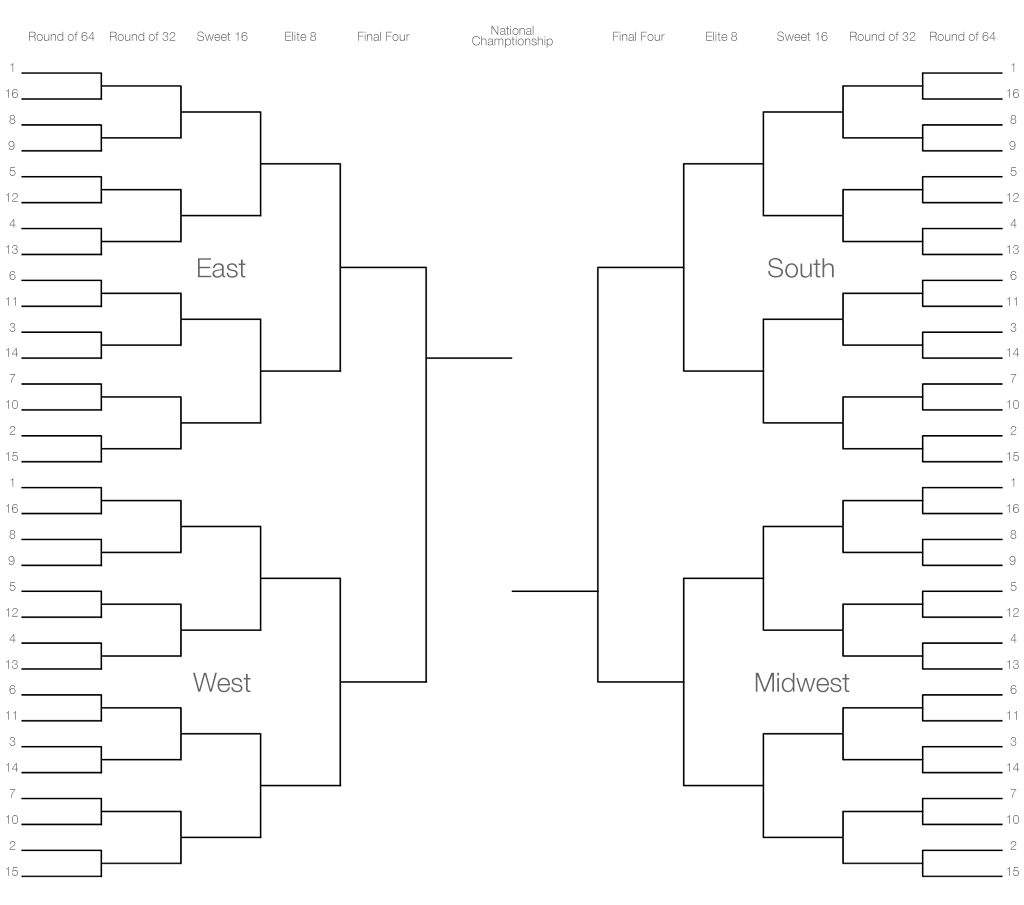
<style>
.page{position:relative;width:1024px;height:905px;background:#ffffff}
.page>*{position:absolute;margin:0}
.t1{font:12.5px/10.4px "HelveticaNeue-Light";color:#666666}
.t2{font:12.5px "HelveticaNeue-Light"}
.t3{font:12.5px "HelveticaNeue-Light";color:#666666}
.t4{font:26.6px "HelveticaNeue-Light";color:#666666}
</style>
<div class="page">
<p class="t1" style="left:472px;top:25px;width:81px;height:23px;text-align:center">National<br>Champtionship</p>
<p class="t2" style="left:29px;top:31px;width:66px;height:10px">Round of 64</p>
<p class="t2" style="left:110px;top:31px;width:66px;height:10px">Round of 32</p>
<p class="t2" style="left:197px;top:31px;width:51px;height:10px">Sweet 16</p>
<p class="t2" style="left:285px;top:31px;width:31px;height:10px">Elite 8</p>
<p class="t3" style="left:358px;top:31px;width:52px;height:10px">Final Four</p>
<p class="t3" style="left:613px;top:31px;width:52px;height:10px">Final Four</p>
<p class="t2" style="left:706px;top:31px;width:31px;height:10px">Elite 8</p>
<p class="t2" style="left:777px;top:31px;width:51px;height:10px">Sweet 16</p>
<p class="t2" style="left:850px;top:31px;width:66px;height:10px">Round of 32</p>
<p class="t2" style="left:930px;top:31px;width:66px;height:10px">Round of 64</p>
<p class="t3" style="left:10px;top:63px;width:4px;height:9px">1</p>
<p class="t3" style="left:1011px;top:63px;width:4px;height:9px">1</p>
<p class="t3" style="left:5px;top:89px;width:13px;height:9px">16</p>
<p class="t3" style="left:1006px;top:89px;width:13px;height:9px">16</p>
<p class="t2" style="left:9px;top:115px;width:7px;height:9px">8</p>
<p class="t2" style="left:1010px;top:115px;width:7px;height:9px">8</p>
<p class="t2" style="left:8px;top:141px;width:7px;height:9px">9</p>
<p class="t2" style="left:1009px;top:141px;width:7px;height:9px">9</p>
<p class="t2" style="left:9px;top:167px;width:7px;height:9px">5</p>
<p class="t2" style="left:1010px;top:167px;width:7px;height:9px">5</p>
<p class="t2" style="left:5px;top:193px;width:13px;height:9px">12</p>
<p class="t2" style="left:1006px;top:193px;width:13px;height:9px">12</p>
<p class="t2" style="left:9px;top:219px;width:7px;height:9px">4</p>
<p class="t2" style="left:1010px;top:219px;width:7px;height:9px">4</p>
<p class="t2" style="left:5px;top:245px;width:13px;height:9px">13</p>
<p class="t2" style="left:1006px;top:245px;width:13px;height:9px">13</p>
<p class="t4" style="left:198px;top:258px;width:48px;height:20px">East</p>
<p class="t4" style="left:768px;top:258px;width:66px;height:20px">South</p>
<p class="t2" style="left:9px;top:271px;width:7px;height:9px">6</p>
<p class="t2" style="left:1010px;top:271px;width:7px;height:9px">6</p>
<p class="t2" style="left:5px;top:297px;width:11px;height:9px">11</p>
<p class="t2" style="left:1006px;top:297px;width:11px;height:9px">11</p>
<p class="t2" style="left:9px;top:323px;width:7px;height:9px">3</p>
<p class="t2" style="left:1010px;top:323px;width:7px;height:9px">3</p>
<p class="t2" style="left:5px;top:348px;width:13px;height:9px">14</p>
<p class="t2" style="left:1006px;top:348px;width:13px;height:9px">14</p>
<p class="t2" style="left:9px;top:374px;width:7px;height:9px">7</p>
<p class="t2" style="left:1010px;top:374px;width:7px;height:9px">7</p>
<p class="t2" style="left:5px;top:400px;width:13px;height:9px">10</p>
<p class="t2" style="left:1006px;top:400px;width:13px;height:9px">10</p>
<p class="t2" style="left:9px;top:426px;width:7px;height:9px">2</p>
<p class="t2" style="left:1010px;top:426px;width:7px;height:9px">2</p>
<p class="t3" style="left:5px;top:452px;width:13px;height:9px">15</p>
<p class="t3" style="left:1006px;top:452px;width:13px;height:9px">15</p>
<p class="t3" style="left:10px;top:478px;width:4px;height:9px">1</p>
<p class="t3" style="left:1011px;top:478px;width:4px;height:9px">1</p>
<p class="t3" style="left:5px;top:504px;width:13px;height:9px">16</p>
<p class="t3" style="left:1006px;top:504px;width:13px;height:9px">16</p>
<p class="t2" style="left:9px;top:530px;width:7px;height:9px">8</p>
<p class="t2" style="left:1010px;top:530px;width:7px;height:9px">8</p>
<p class="t2" style="left:8px;top:556px;width:7px;height:9px">9</p>
<p class="t2" style="left:1009px;top:556px;width:7px;height:9px">9</p>
<p class="t2" style="left:9px;top:582px;width:7px;height:9px">5</p>
<p class="t2" style="left:1010px;top:582px;width:7px;height:9px">5</p>
<p class="t2" style="left:5px;top:608px;width:13px;height:9px">12</p>
<p class="t2" style="left:1006px;top:608px;width:13px;height:9px">12</p>
<p class="t2" style="left:9px;top:634px;width:7px;height:9px">4</p>
<p class="t2" style="left:1010px;top:634px;width:7px;height:9px">4</p>
<p class="t2" style="left:5px;top:660px;width:13px;height:9px">13</p>
<p class="t2" style="left:1006px;top:660px;width:13px;height:9px">13</p>
<p class="t4" style="left:193px;top:672px;width:58px;height:21px">West</p>
<p class="t4" style="left:755px;top:672px;width:95px;height:21px">Midwest</p>
<p class="t2" style="left:9px;top:685px;width:7px;height:9px">6</p>
<p class="t2" style="left:1010px;top:685px;width:7px;height:9px">6</p>
<p class="t2" style="left:5px;top:711px;width:11px;height:9px">11</p>
<p class="t2" style="left:1006px;top:711px;width:11px;height:9px">11</p>
<p class="t2" style="left:9px;top:737px;width:7px;height:9px">3</p>
<p class="t2" style="left:1010px;top:737px;width:7px;height:9px">3</p>
<p class="t2" style="left:5px;top:763px;width:13px;height:9px">14</p>
<p class="t2" style="left:1006px;top:763px;width:13px;height:9px">14</p>
<p class="t2" style="left:9px;top:789px;width:7px;height:9px">7</p>
<p class="t2" style="left:1010px;top:789px;width:7px;height:9px">7</p>
<p class="t2" style="left:5px;top:815px;width:13px;height:9px">10</p>
<p class="t2" style="left:1006px;top:815px;width:13px;height:9px">10</p>
<p class="t2" style="left:9px;top:841px;width:7px;height:9px">2</p>
<p class="t2" style="left:1010px;top:841px;width:7px;height:9px">2</p>
<p class="t3" style="left:5px;top:867px;width:13px;height:9px">15</p>
<p class="t3" style="left:1006px;top:867px;width:13px;height:9px">15</p>
</div>
